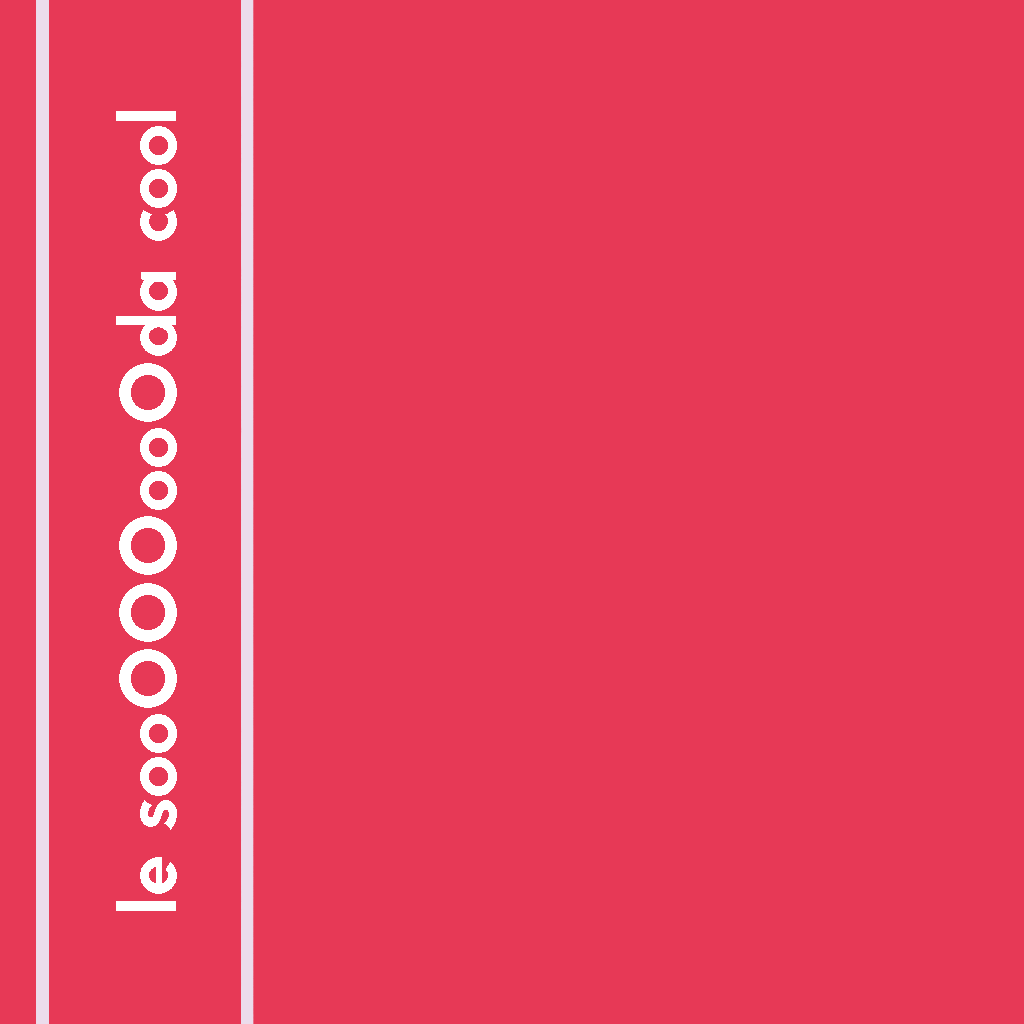
<style>
.page{position:relative;width:1024px;height:1024px;background:#e73956}
.page>*{position:absolute;margin:0}
.t1{font:80px "Jaapokki-Regular";color:#ffffff}
</style>
<div class="page">
<p class="t1" style="left:116px;top:111px;width:61px;height:800px;rotate:-90deg">le sooOOOooOda cool</p>
</div>
